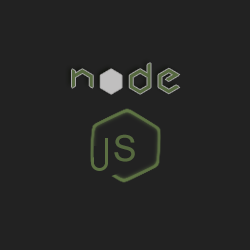
<style>
.page{position:relative;width:250px;height:250px;background:#222222}
.page>*{position:absolute;margin:0}
.t1{font:29.1px "Cubic";letter-spacing:0.2em;color:#5f7544;font-variant:small-caps}
.t2{font:29.1px "Cubic";letter-spacing:0.2em;color:#dcdada;font-variant:small-caps}
.t3{font:36px "ArialMT";letter-spacing:0.2em;color:#5f7544;font-variant:small-caps}
</style>
<div class="page">
<p class="t1" style="left:72px;top:63px;width:108px;height:31px">N<span class="t2">O</span>DE</p>
<p class="t3" style="left:114px;top:134px;width:21px;height:28px">S</p>
</div>
